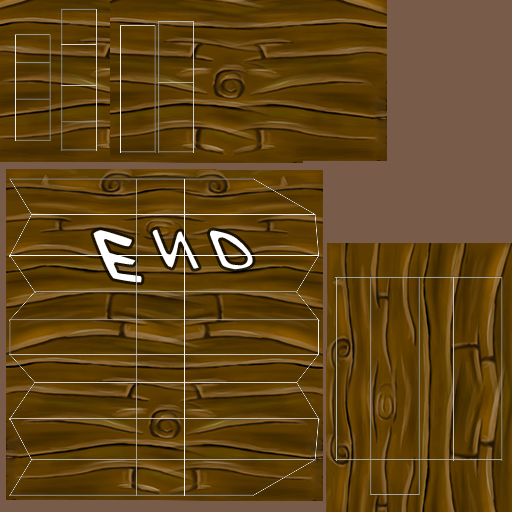
<style>
.page{position:relative;width:512px;height:512px}
.page>*{position:absolute;margin:0}
.t1{font:72.1px "ComicBook";letter-spacing:0.16em;color:#ffffff}
</style>
<div class="page">
<p class="t1" style="left:92px;top:228px;width:162px;height:56px">End</p>
</div>
